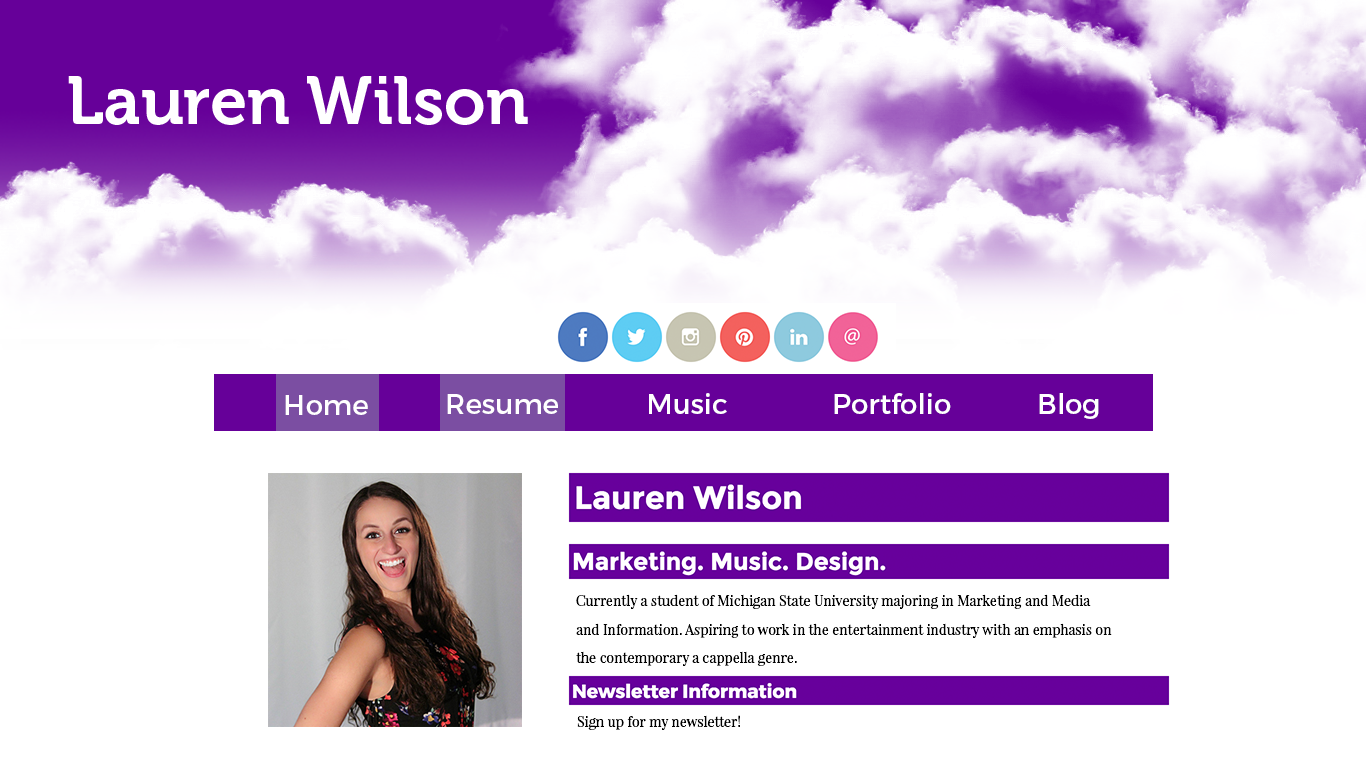
<style>
.page{position:relative;width:1366px;height:768px;background:#ffffff}
.page>*{position:absolute;margin:0}
.t1{font:48px "Montserrat-Regular";color:#ffffff}
.t2{font:24px "PlayfairDisplay-Regular";color:#000000}
</style>
<div class="page">
<p class="t1" style="left:285px;top:395px;width:83px;height:20px">Home</p>
<p class="t1" style="left:447px;top:394px;width:111px;height:20px">Resume</p>
<p class="t1" style="left:649px;top:393px;width:78px;height:21px">Music</p>
<p class="t1" style="left:834px;top:393px;width:117px;height:21px">Portfolio</p>
<p class="t1" style="left:1039px;top:393px;width:60px;height:26px">Blog</p>
<p class="t2" style="left:576px;top:594px;width:536px;height:72px">Currently a student of Michigan State University majoring in Marketing and Media and Information. Aspiring to work in the entertainment industry with an emphasis on the contemporary a cappella genre.</p>
<p class="t2" style="left:577px;top:715px;width:163px;height:15px">Sign up for my newsletter!</p>
</div>
